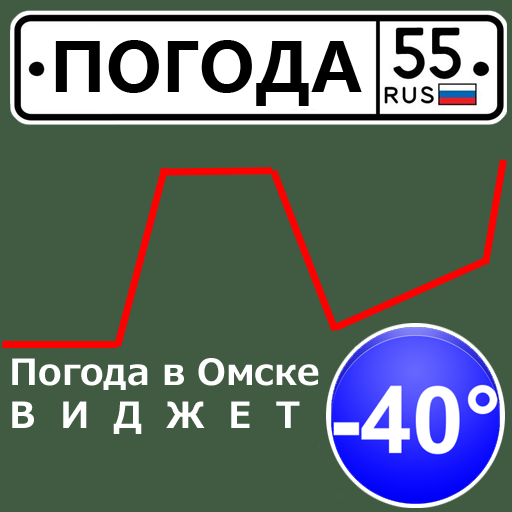
<style>
.page{position:relative;width:512px;height:512px;background:#405b41}
.page>*{position:absolute;margin:0}
.t1{font:68px "MicrosoftYaHei-Bold";color:#000000}
.t2{font:36px "Meiryo-Bold";color:#ffffff}
</style>
<div class="page">
<p class="t1" style="left:55px;top:40px;width:307px;height:66px">ПОГОДА</p>
<p class="t2" style="left:12px;top:358px;width:307px;height:76px">Погода в Омске<br>В  И  Д  Ж  Е  Т</p>
</div>
